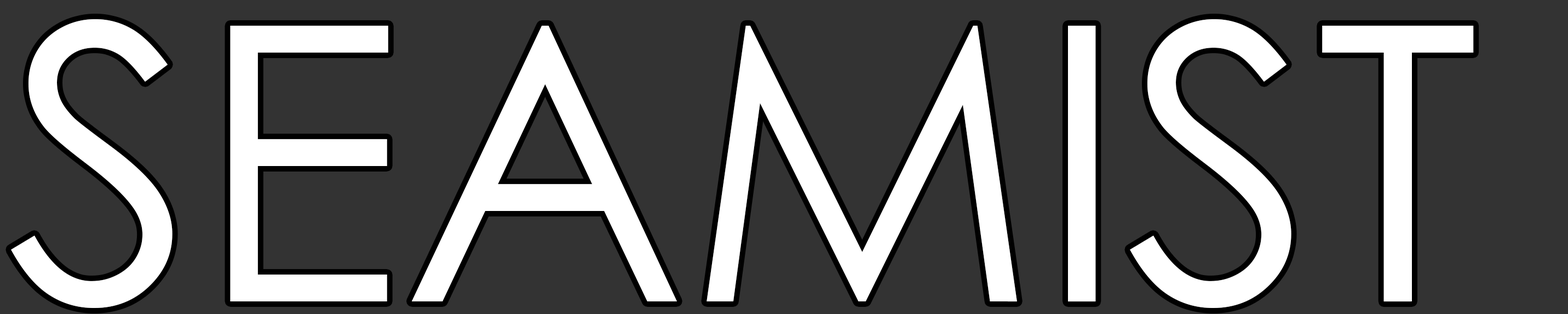
<style>
.page{position:relative;width:1568px;height:314px;background:#333333}
.page>*{position:absolute;margin:0}
.t1{font:383.4px "CenturyGothic";color:#ffffff}
</style>
<div class="page">
<p class="t1" style="left:11px;top:19px;width:1463px;height:289px">SEAMIST</p>
</div>
